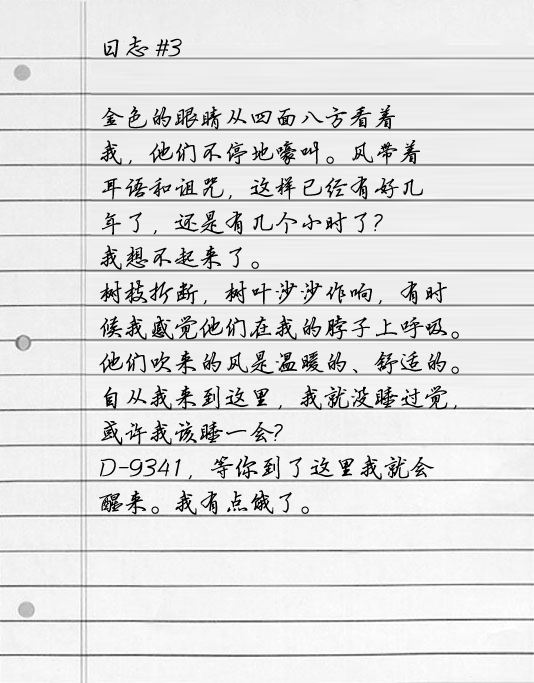
<style>
.page{position:relative;width:534px;height:683px}
.page>*{position:absolute;margin:0}
.t1{font:25px/35px "FZYBXSJW--GB1-0";color:#000000}
</style>
<div class="page">
<p class="t1" style="left:99px;top:36px;width:360px;height:479px">日志 #3<br><br>金色的眼睛从四面八方看着<br>我，他们不停地嚎叫。风带着<br>耳语和诅咒，这样已经有好几<br>年了，还是有几个小时了?<br>我想不起来了。<br>树枝折断，树叶沙沙作响，有时<br>候我感觉他们在我的脖子上呼吸。<br>他们吹来的风是温暖的、舒适的。<br>自从我来到这里，我就没睡过觉，<br>或许我该睡一会?<br>D-9341，等你到了这里我就会<br>醒来。我有点饿了。</p>
</div>
